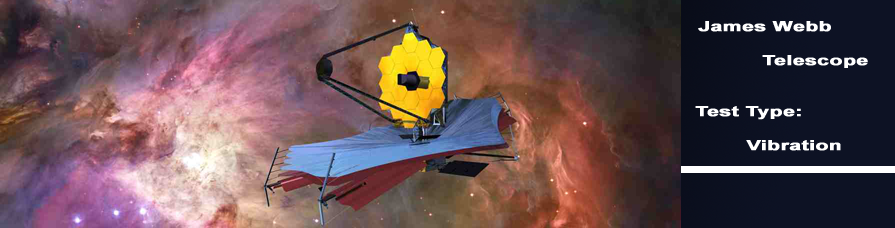
<style>
.page{position:relative;width:895px;height:228px}
.page>*{position:absolute;margin:0}
.t1{font:14px "Arial-BoldMT";color:#ffffff;font-weight:bold;scale:1.5 1}
</style>
<div class="page">
<p class="t1" style="left:698px;top:21px;width:170px;height:47px">James Webb<br><br>          Telescope</p>
<p class="t1" style="left:695px;top:106px;width:146px;height:45px">Test Type:<br>      <br>        Vibration</p>
</div>
